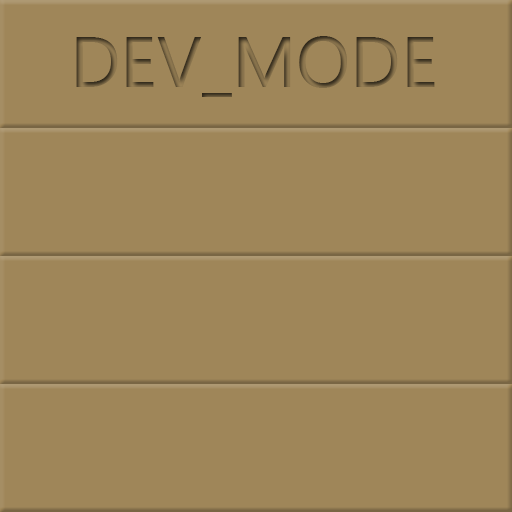
<style>
.page{position:relative;width:512px;height:512px;background:#9f8659}
.page>*{position:absolute;margin:0}
.t1{font:72px "NirmalaUI"}
</style>
<div class="page">
<p class="t1" style="left:76px;top:36px;width:359px;height:61px">DEV_MODE</p>
</div>
